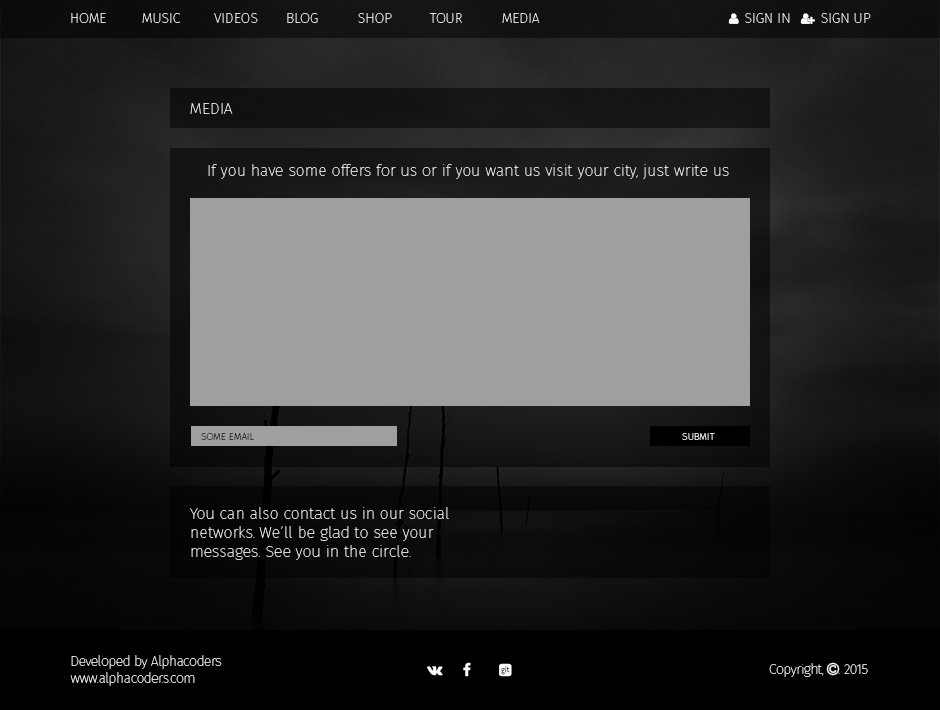
<style>
.page{position:relative;width:940px;height:710px}
.page>*{position:absolute;margin:0}
.t1{font:14px "FiraSans-Eight";color:#ffffff}
.t2{font:16px "FiraSans-Eight";color:#ffffff}
.t3{font:10px "FiraSans-Eight";color:#000000}
.t4{font:10px "FiraSans-Eight";color:#ffffff}
.t5{font:14px "FiraSans-Eight";letter-spacing:-0.035em;color:#ffffff}
</style>
<div class="page">
<p class="t1" style="left:71px;top:13px;width:469px;height:10px">HOME MUSIC VIDEOS BLOG  SHOP  TOUR  MEDIA</p>
<p class="t2" style="left:190px;top:103px;width:43px;height:11px">MEDIA</p>
<p class="t2" style="left:208px;top:164px;width:521px;height:15px">If you have some offers for us or if you want us visit your city, just write us</p>
<p class="t3" style="left:201px;top:433px;width:53px;height:7px">SOME EMAIL</p>
<p class="t4" style="left:682px;top:432px;width:33px;height:8px">SUBMIT</p>
<p class="t2" style="left:190px;top:507px;width:259px;height:53px">You can also contact us in our social<br>networks. We’ll be glad to see your<br>messages. See you in the circle.</p>
<p class="t5" style="left:70px;top:655px;width:152px;height:31px">Developed by Alphacoders<br>www.alphacoder.s.com</p>
</div>
